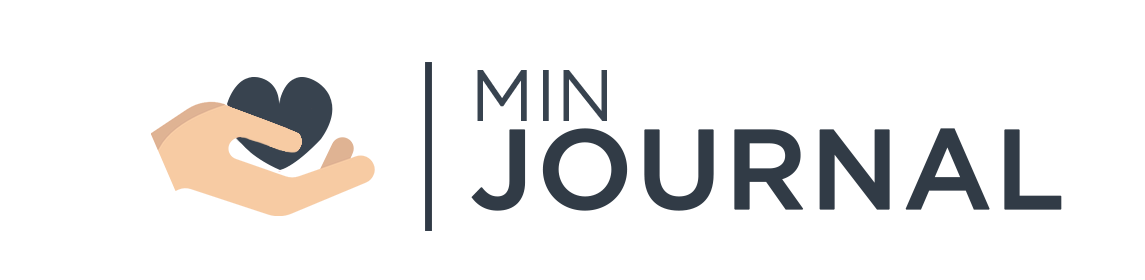
<style>
.page{position:relative;width:1145px;height:280px;background:#ffffff}
.page>*{position:absolute;margin:0}
.t1{font:113.3px/89.8px "Gotham-Medium";color:#313b46;text-transform:uppercase;font-weight:bold}
.t2{font:71.7px/89.8px "Gotham-Light";color:#38434f;text-transform:uppercase;font-weight:bold}
</style>
<div class="page">
<p class="t1" style="left:471px;top:70px;width:591px;height:141px"><span class="t2">MIN<br></span>JOURNAL</p>
</div>
